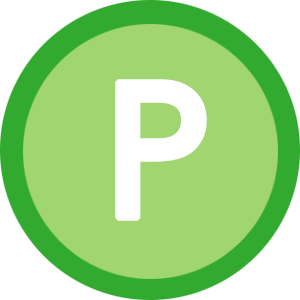
<style>
.page{position:relative;width:300px;height:300px;background:#a1d56f}
.page>*{position:absolute;margin:0}
.t1{font:200px "GillSansMT";letter-spacing:-0.07em;color:#ffffff;font-weight:bold}
</style>
<div class="page">
<p class="t1" style="left:115px;top:79px;width:92px;height:142px">P</p>
</div>
